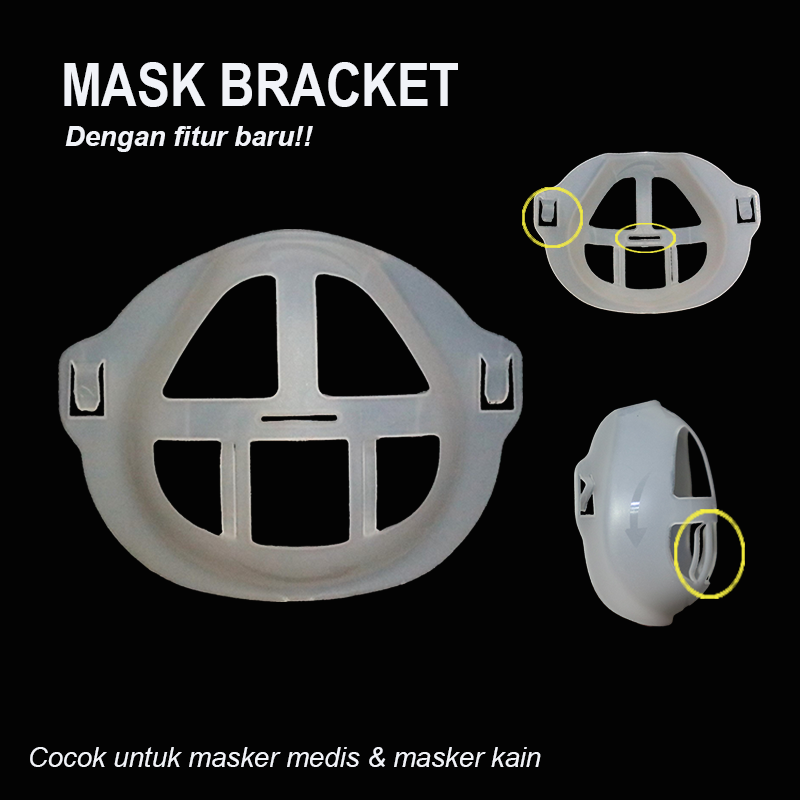
<style>
.page{position:relative;width:800px;height:800px;background:#030303}
.page>*{position:absolute;margin:0}
.t1{font:60px "ArialNarrow-Bold";color:#f1f3f8}
.t2{font:27.5px "Arial-BoldItalicMT";color:#f1f3f8}
.t3{font:27.5px "Arial-ItalicMT";color:#f1f3f8}
</style>
<div class="page">
<p class="t1" style="left:64px;top:62px;width:394px;height:45px">MASK BRACKET</p>
<p class="t2" style="left:65px;top:126px;width:248px;height:26px">Dengan fitur baru!!</p>
<p class="t3" style="left:30px;top:747px;width:511px;height:20px">Cocok untuk masker medis &amp; masker kain</p>
</div>
